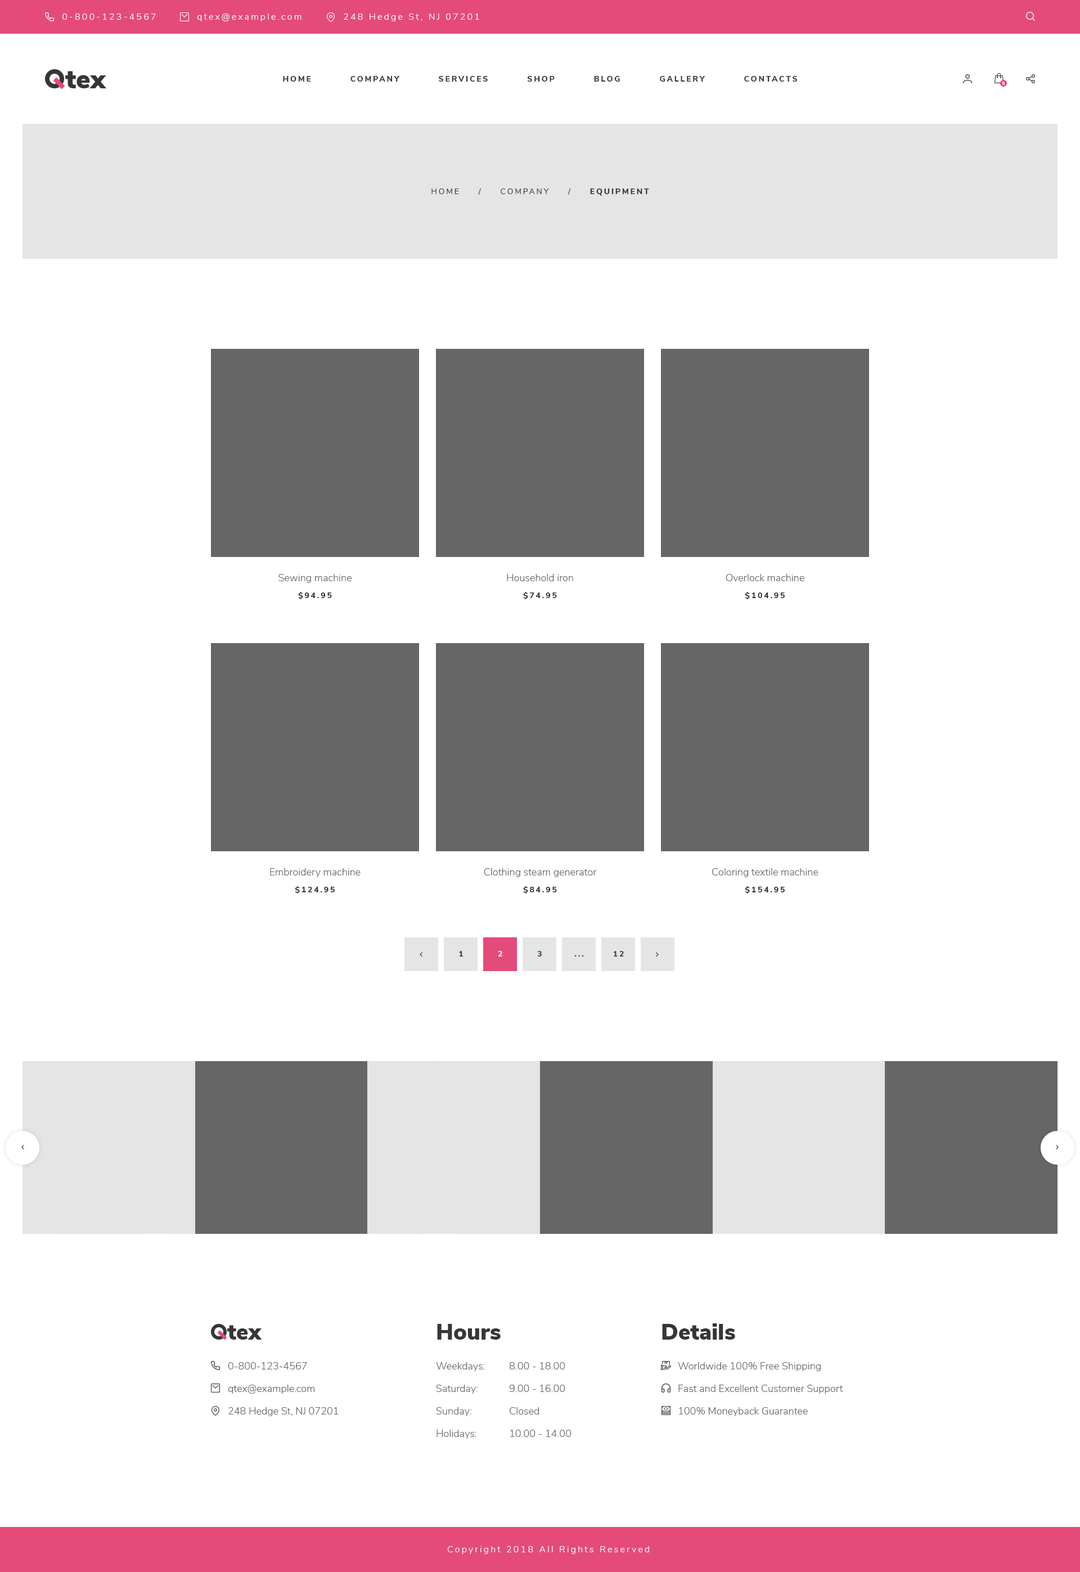
<style>
.page{position:relative;width:1080px;height:1572px;background:#ffffff}
.page>*{position:absolute;margin:0}
.t1{font:9px "NunitoSans-Light";letter-spacing:0.2em;color:#ffffff}
.t2{font:7.9px "NunitoSans-ExtraBold";letter-spacing:0.2em;color:#363636;text-transform:uppercase}
.t3{font:4.5px "NunitoSans-Black";color:#ffffff;text-transform:uppercase}
.t4{font:7.9px "NunitoSans-Regular";letter-spacing:0.2em;color:#363636;text-transform:uppercase}
.t5{font:10.1px "NunitoSans-Light";color:#666666}
.t6{font:7.9px "NunitoSans-ExtraBold";letter-spacing:0.2em;color:#363636}
.t7{font:7.9px "NunitoSans-ExtraBold";letter-spacing:0.2em;color:#ffffff}
.t8{font:22.5px "NunitoSans-Black";color:#363636}
.t9{font:10.1px/22.5px "NunitoSans-Light";color:#666666}
</style>
<div class="page">
<p class="t1" style="left:62px;top:14px;width:94px;height:6px">0-800-123-4567</p>
<p class="t1" style="left:197px;top:14px;width:105px;height:7px">qtex@example.com</p>
<p class="t1" style="left:344px;top:14px;width:135px;height:7px">248 Hedge St, NJ 07201</p>
<p class="t2" style="left:283px;top:76px;width:515px;height:6px">Home          Company          Services          Shop          Blog          Gallery          Contacts</p>
<p class="t3" style="left:1002px;top:82px;width:3px;height:3px">5</p>
<p class="t4" style="left:431px;top:188px;width:218px;height:8px">Home     /     Company     /     <span class="t2">Equipment</span></p>
<p class="t5" style="left:278px;top:574px;width:74px;height:9px">Sewing machine</p>
<p class="t5" style="left:507px;top:574px;width:66px;height:7px">Household iron</p>
<p class="t5" style="left:726px;top:574px;width:78px;height:7px">Overlock machine</p>
<p class="t2" style="left:298px;top:592px;width:34px;height:7px">$94.95</p>
<p class="t2" style="left:523px;top:592px;width:34px;height:7px">$74.95</p>
<p class="t2" style="left:745px;top:592px;width:40px;height:7px">$104.95</p>
<p class="t5" style="left:270px;top:868px;width:91px;height:9px">Embroidery machine</p>
<p class="t5" style="left:484px;top:868px;width:113px;height:9px">Clothing steam generator</p>
<p class="t5" style="left:712px;top:868px;width:106px;height:9px">Coloring textile machine</p>
<p class="t2" style="left:295px;top:886px;width:40px;height:7px">$124.95</p>
<p class="t2" style="left:523px;top:886px;width:34px;height:7px">$84.95</p>
<p class="t2" style="left:745px;top:886px;width:40px;height:7px">$154.95</p>
<p class="t6" style="left:459px;top:951px;width:5px;height:5px">1</p>
<p class="t7" style="left:498px;top:951px;width:4px;height:5px">2</p>
<p class="t6" style="left:537px;top:951px;width:5px;height:5px">3</p>
<p class="t6" style="left:613px;top:951px;width:11px;height:5px">125</p>
<p class="t6" style="left:575px;top:955px;width:8px;height:1px">...</p>
<p class="t8" style="left:437px;top:1324px;width:64px;height:15px">Hours</p>
<p class="t8" style="left:662px;top:1323px;width:73px;height:16px">Details</p>
<p class="t9" style="left:228px;top:1362px;width:111px;height:54px">0-800-123-4567<br>qtex@example.com<br>248 Hedge St, NJ 07201</p>
<p class="t9" style="left:436px;top:1362px;width:49px;height:76px">Weekdays:<br>Saturday:<br>Sunday:<br>Holidays:</p>
<p class="t9" style="left:509px;top:1362px;width:63px;height:75px">8.00 - 18.00<br>9.00 - 16.00<br>Closed<br>10.00 - 14.00</p>
<p class="t9" style="left:678px;top:1361px;width:165px;height:55px">Worldwide 100% Free Shipping<br>Fast and Excellent Customer Support<br>100% Moneyback Guarantee</p>
<p class="t1" style="left:447px;top:1546px;width:202px;height:8px">Copyright 2018 All Rights Reserved</p>
</div>
